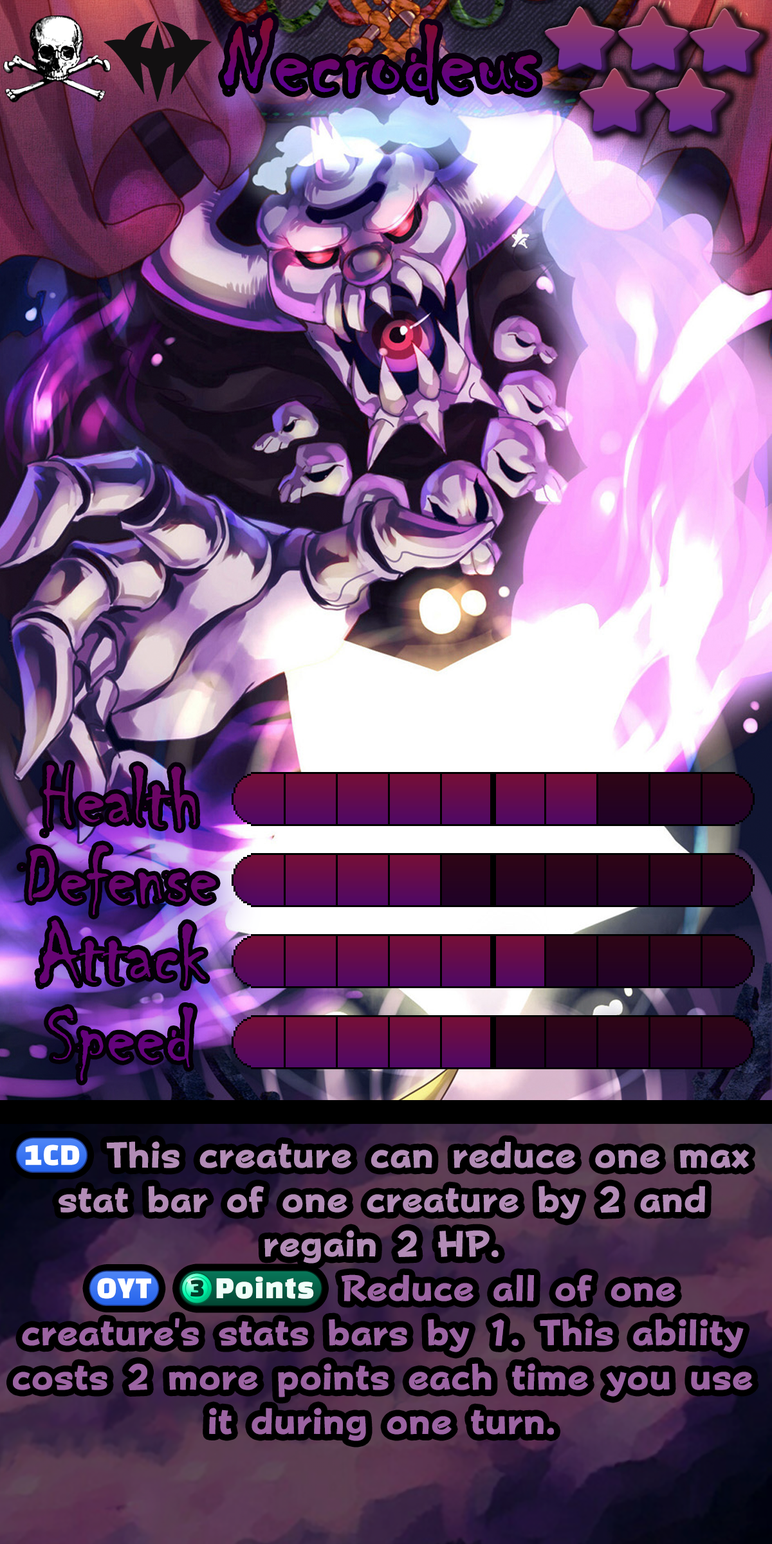
<style>
.page{position:relative;width:772px;height:1544px}
.page>*{position:absolute;margin:0}
.t1{font:184px "Chiller-Regular"}
.t2{font:148px "Chiller-Regular";color:#660474}
.t3{font:61.8px/44.4px "FOTPopHappinessStrp-ExtraBold";color:#9b64a2}
.t4{font:61.8px/44.4px "stoogedings-Regular";color:#b28cb6}
.t5{font:61.8px/44.4px "FOTPopHappinessStrp-ExtraBold";color:#b28cb6}
.t6{font:61.8px/44.4px "stoogedings-Regular";letter-spacing:0.5em;color:#9b64a2}
.t7{font:63px/44.4px "stoogedings-Regular";color:#9b64a2}
</style>
<div class="page">
<p class="t1" style="left:224px;top:17px;width:313px;height:83px">Necrodeus</p>
<p class="t2" style="left:39px;top:920px;width:167px;height:67px">Attack</p>
<p class="t3" style="left:13px;top:1138px;width:740px;height:303px;text-align:center"><span class="t4">(1CD)</span><span class="t5"> This creature can reduce one max stat bar of one creature by 2 and regain 2 HP. <br></span><span class="t6">(OYT)</span><span class="t7">(3 points)</span> Reduce all of one creature's stats bars by 1. This ability costs 2 more points each time you use it during one turn.</p>
</div>
